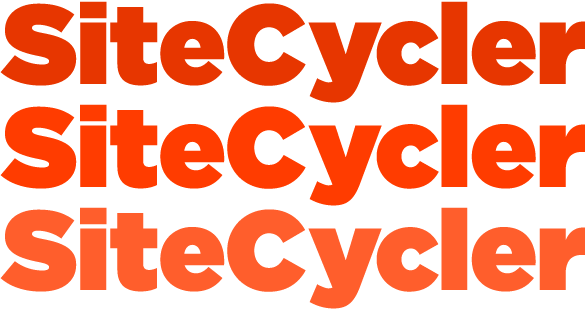
<style>
.page{position:relative;width:586px;height:309px;background:#ffffff}
.page>*{position:absolute;margin:0}
.t1{font:112.5px "GothamHTF-Ultra";letter-spacing:-0.01em;color:#e63600}
.t2{font:112.5px "GothamHTF-Ultra";letter-spacing:-0.01em;color:#ff3c00}
.t3{font:112.5px "GothamHTF-Ultra";letter-spacing:-0.01em;color:#ff5e2c}
</style>
<div class="page">
<p class="t1" style="left:0px;top:1px;width:585px;height:102px">SiteCycler</p>
<p class="t2" style="left:0px;top:104px;width:585px;height:102px">SiteCycler</p>
<p class="t3" style="left:0px;top:207px;width:585px;height:102px">SiteCycler</p>
</div>
